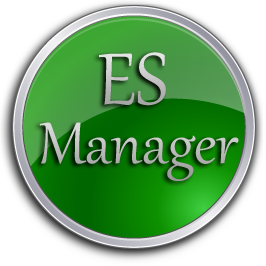
<style>
.page{position:relative;width:266px;height:266px}
.page>*{position:absolute;margin:0}
.t1{font:90px "Gabriola"}
.t2{font:72px "Gabriola";color:#bcbcbc}
</style>
<div class="page">
<p class="t1" style="left:99px;top:52px;width:67px;height:54px">ES</p>
<p class="t2" style="left:39px;top:122px;width:200px;height:59px">Manager</p>
</div>
